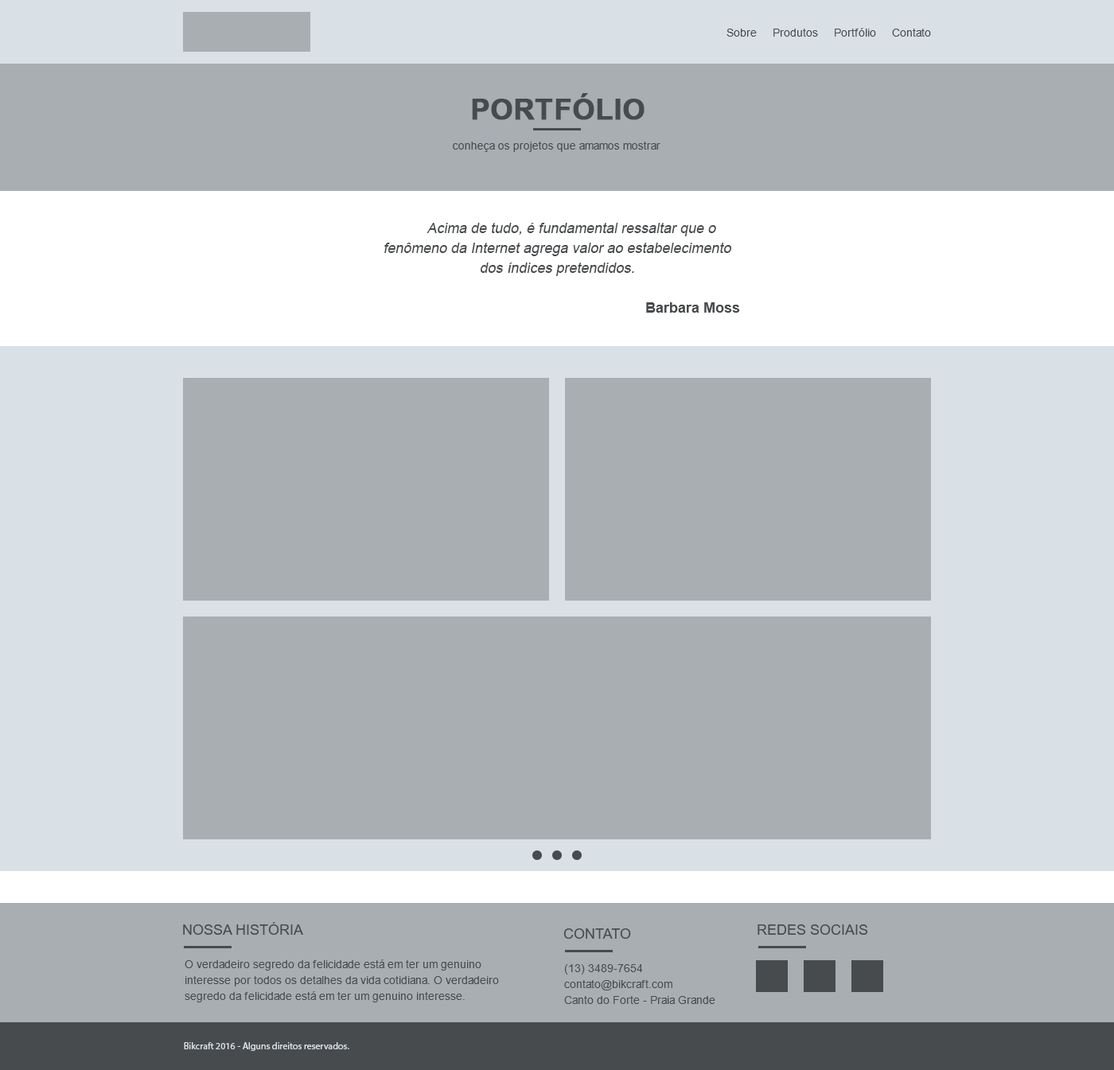
<style>
.page{position:relative;width:1114px;height:1070px;background:#a9aeb3}
.page>*{position:absolute;margin:0}
.t1{font:11.1px "ArialMT";color:#484b4d}
.t2{font:28.6px "Arial-BoldMT";color:#484b4d;text-transform:uppercase;font-weight:bold}
.t3{font:14.3px/19.9px "ArialMT";color:#484b4d;font-style:italic}
.t4{font:14.3px/19.9px "Arial-BoldMT";color:#484b4d}
.t5{font:14.3px "ArialMT";color:#484b4d;text-transform:uppercase}
.t6{font:11.1px/15.9px "ArialMT";color:#484b4d}
.t7{font:9.5px "MyriadPro-Regular";color:#d9e0e6}
</style>
<div class="page">
<p class="t1" style="left:727px;top:28px;width:204px;height:9px">Sobre     Produtos     Portfólio     Contato</p>
<p class="t2" style="left:472px;top:93px;width:173px;height:27px">portfólio</p>
<p class="t1" style="left:453px;top:142px;width:207px;height:10px">conheça os projetos que amamos mostrar</p>
<p class="t3" style="left:384px;top:223px;width:356px;height:90px;text-align:center">Acima de tudo, é fundamental ressaltar que o fenômeno da Internet agrega valor ao estabelecimento dos índices pretendidos.<br><br><span class="t4">Barbara Moss</span></p>
<p class="t5" style="left:183px;top:922px;width:120px;height:13px">Nossa História</p>
<p class="t5" style="left:563px;top:929px;width:68px;height:10px">Contato</p>
<p class="t5" style="left:758px;top:925px;width:109px;height:10px">redes sociais</p>
<p class="t6" style="left:185px;top:960px;width:314px;height:43px">O verdadeiro segredo da felicidade está em ter um genuino<br>interesse por todos os detalhes da vida cotidiana. O verdadeiro segredo da felicidade está em ter um genuino interesse.</p>
<p class="t6" style="left:564px;top:964px;width:151px;height:40px">(13) 3489-7654<br>contato@bikcraft.com<br>Canto do Forte - Praia Grande</p>
<p class="t7" style="left:184px;top:1042px;width:165px;height:9px">Bikcraft 2016 - Alguns direitos reservados.</p>
</div>
